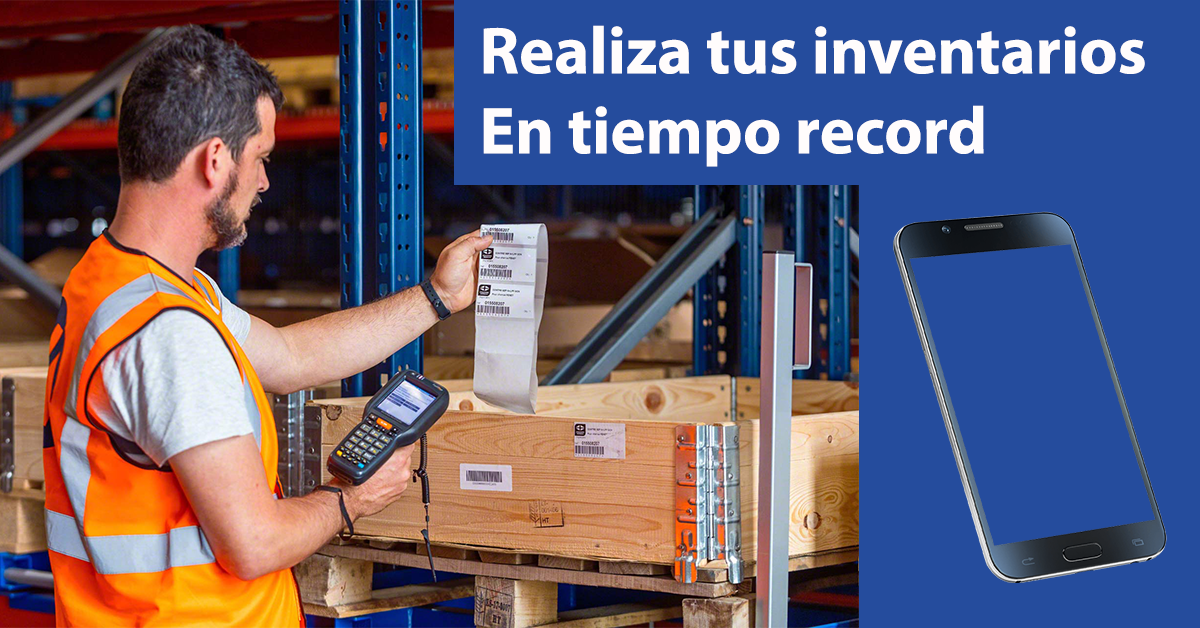
<style>
.page{position:relative;width:1200px;height:628px;background:#254c9d}
.page>*{position:absolute;margin:0}
.t1{font:66.7px "MyriadPro-Bold";color:#fffcfc}
</style>
<div class="page">
<p class="t1" style="left:483px;top:25px;width:662px;height:142px">Realiza tus inventarios<br>En tiempo record</p>
</div>
